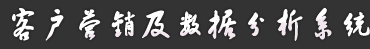
<style>
.page{position:relative;width:370px;height:49px;background:#333333}
.page>*{position:absolute;margin:0}
.t1{font:35px "GJJHCJW--GB1-0";letter-spacing:-0.075em;color:#ffffff;font-weight:bold}
</style>
<div class="page">
<p class="t1" style="left:12px;top:7px;width:358px;height:34px">客户营销及数据分析系统</p>
</div>
